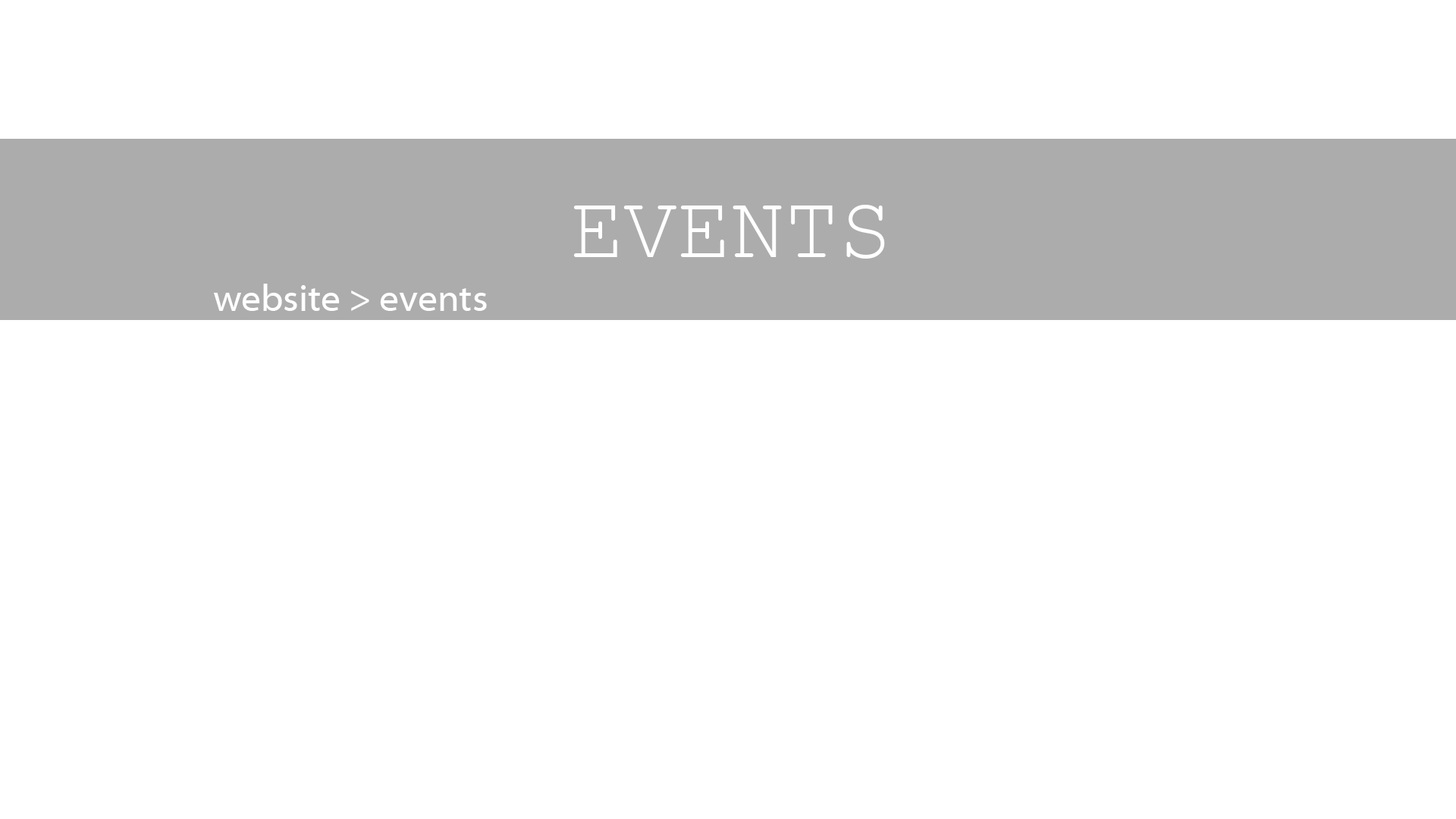
<style>
.page{position:relative;width:1456px;height:819px;background:#ffffff}
.page>*{position:absolute;margin:0}
.t1{font:89.5px "CourierNewPSMT";color:#ffffff}
.t2{font:37.9px "MyriadWebPro";color:#ffffff}
</style>
<div class="page">
<p class="t1" style="left:574px;top:205px;width:311px;height:54px">EVENTS</p>
<p class="t2" style="left:214px;top:284px;width:273px;height:27px">website &gt; events</p>
</div>
